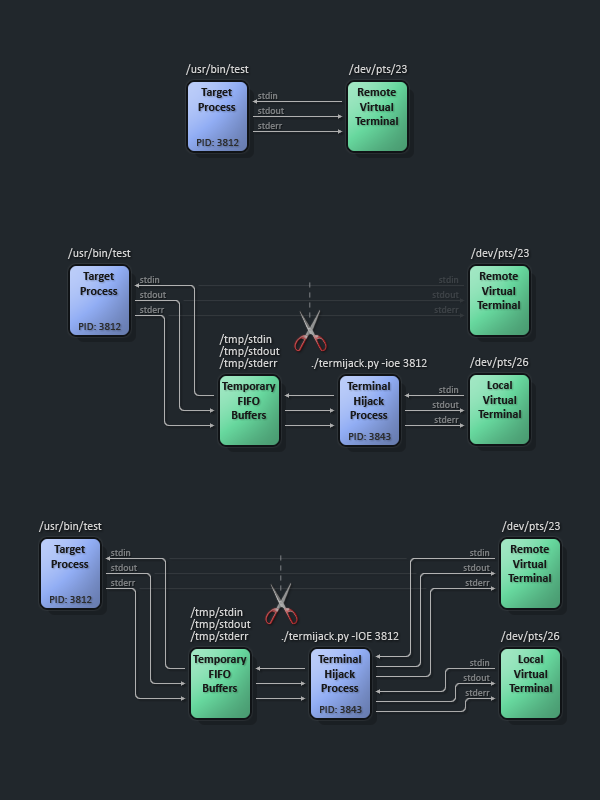
<style>
.page{position:relative;width:600px;height:800px;background:#21272c}
.page>*{position:absolute;margin:0}
.t1{font:12px "Calibri";color:#d2d2d2}
.t2{font:12px "Calibri-Bold";color:#181818}
.t3{font:10px/15px "Calibri";color:#7a7d7f}
.t4{font:11px "Calibri";color:#2b2c2d}
.t5{font:10px/15px "Calibri";color:#3b4045}
.t6{font:12px/12px "Calibri";color:#d2d2d2}
</style>
<div class="page">
<p class="t1" style="left:185px;top:64px;width:64px;height:11px">/usr/bin/test</p>
<p class="t1" style="left:348px;top:64px;width:59px;height:11px">/dev/pts/23</p>
<p class="t2" style="left:198px;top:88px;width:38px;height:23px;text-align:center">Target<br>Process</p>
<p class="t2" style="left:355px;top:88px;width:43px;height:37px;text-align:center">Remote<br>Virtual<br>Terminal</p>
<p class="t3" style="left:258px;top:92px;width:26px;height:37px">stdin<br>stdout<br>stderr</p>
<p class="t4" style="left:197px;top:139px;width:42px;height:7px">PID: 3812</p>
<p class="t1" style="left:67px;top:248px;width:64px;height:11px">/usr/bin/test</p>
<p class="t1" style="left:470px;top:248px;width:59px;height:11px">/dev/pts/23</p>
<p class="t2" style="left:80px;top:272px;width:38px;height:23px;text-align:center">Target<br>Process</p>
<p class="t3" style="left:140px;top:276px;width:26px;height:37px">stdin<br>stdout<br>stderr</p>
<p class="t5" style="left:432px;top:276px;width:27px;height:37px;text-align:right">stdin<br>stdout<br>stderr</p>
<p class="t2" style="left:477px;top:272px;width:43px;height:37px;text-align:center">Remote<br>Virtual<br>Terminal</p>
<p class="t4" style="left:79px;top:323px;width:42px;height:7px">PID: 3812</p>
<p class="t6" style="left:219px;top:334px;width:61px;height:35px">/tmp/stdin<br>/tmp/stdout<br>/tmp/stderr</p>
<p class="t1" style="left:311px;top:358px;width:116px;height:11px">./termijack.py -ioe 3812</p>
<p class="t1" style="left:469px;top:357px;width:60px;height:11px">/dev/pts/26</p>
<p class="t2" style="left:222px;top:382px;width:54px;height:37px;text-align:center">Temporary<br>FIFO<br>Buffers</p>
<p class="t2" style="left:347px;top:381px;width:43px;height:38px;text-align:center">Terminal<br>Hijack<br>Process</p>
<p class="t3" style="left:432px;top:386px;width:27px;height:37px;text-align:right">stdin<br>stdout<br>stderr</p>
<p class="t2" style="left:478px;top:381px;width:43px;height:37px;text-align:center">Local<br>Virtual<br>Terminal</p>
<p class="t4" style="left:349px;top:433px;width:42px;height:7px">PID: 3843</p>
<p class="t1" style="left:38px;top:521px;width:64px;height:11px">/usr/bin/test</p>
<p class="t1" style="left:501px;top:521px;width:59px;height:11px">/dev/pts/23</p>
<p class="t2" style="left:51px;top:545px;width:38px;height:23px;text-align:center">Target<br>Process</p>
<p class="t2" style="left:508px;top:545px;width:43px;height:37px;text-align:center">Remote<br>Virtual<br>Terminal</p>
<p class="t3" style="left:111px;top:549px;width:26px;height:37px">stdin<br>stdout<br>stderr</p>
<p class="t3" style="left:463px;top:549px;width:27px;height:37px;text-align:right">stdin<br>stdout<br>stderr</p>
<p class="t4" style="left:50px;top:596px;width:42px;height:7px">PID: 3812</p>
<p class="t6" style="left:190px;top:607px;width:61px;height:35px">/tmp/stdin<br>/tmp/stdout<br>/tmp/stderr</p>
<p class="t1" style="left:281px;top:631px;width:118px;height:11px">./termijack.py -IOE 3812</p>
<p class="t1" style="left:500px;top:631px;width:60px;height:11px">/dev/pts/26</p>
<p class="t2" style="left:318px;top:654px;width:43px;height:38px;text-align:center">Terminal<br>Hijack<br>Process</p>
<p class="t2" style="left:193px;top:655px;width:54px;height:37px;text-align:center">Temporary<br>FIFO<br>Buffers</p>
<p class="t3" style="left:463px;top:659px;width:27px;height:37px;text-align:right">stdin<br>stdout<br>stderr</p>
<p class="t2" style="left:509px;top:655px;width:43px;height:37px;text-align:center">Local<br>Virtual<br>Terminal</p>
<p class="t4" style="left:320px;top:706px;width:42px;height:7px">PID: 3843</p>
</div>
